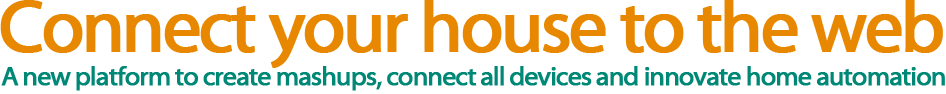
<style>
.page{position:relative;width:946px;height:94px;background:#ffffff}
.page>*{position:absolute;margin:0}
.t1{font:74px "MyriadWebPro";letter-spacing:-0.055em;color:#e88801;font-weight:bold}
.t2{font:27px "MyriadWebPro";letter-spacing:-0.055em;color:#008877;font-weight:bold}
</style>
<div class="page">
<p class="t1" style="left:0px;top:0px;width:943px;height:68px">Connect your house to the web</p>
<p class="t2" style="left:1px;top:66px;width:944px;height:25px">A new platform to create mashups, connect all devices and innovate home automation</p>
</div>
